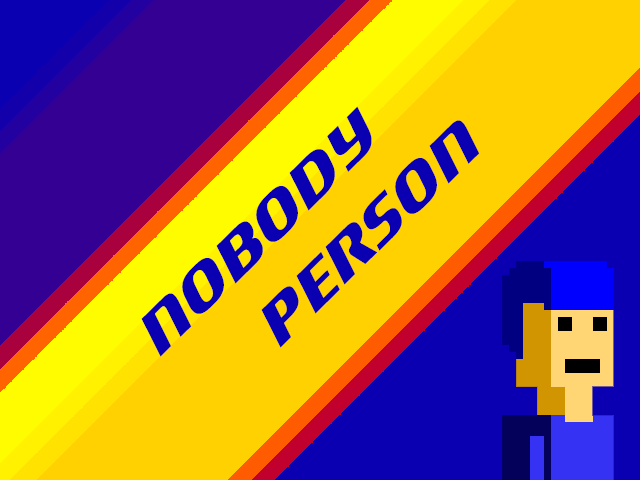
<style>
.page{position:relative;width:640px;height:480px;background:#ffd100}
.page>*{position:absolute;margin:0}
.t1{font:91px/78px "Motorwerk";color:#0a00b2}
</style>
<div class="page">
<p class="t1" style="left:141px;top:106px;width:339px;height:251px;rotate:-45deg">NOBODY<br>   PERSON</p>
</div>
